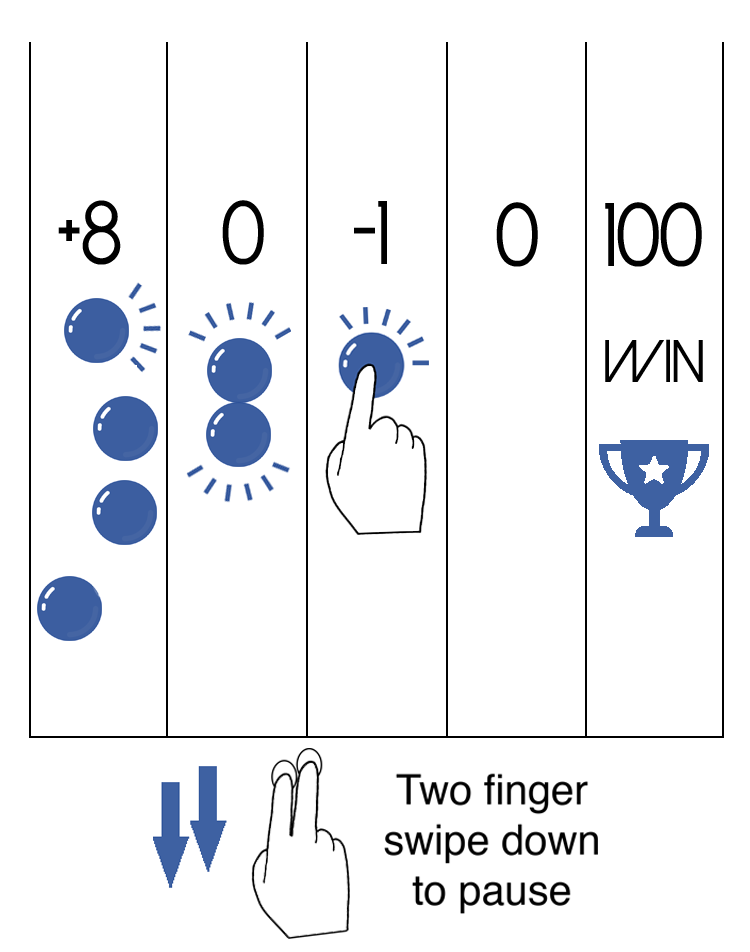
<style>
.page{position:relative;width:750px;height:952px;background:#ffffff}
.page>*{position:absolute;margin:0}
.t1{font:90px "DolceVita";color:#000000}
.t2{font:60px "DolceVita";color:#000000}
</style>
<div class="page">
<p class="t1" style="left:58px;top:200px;width:63px;height:65px">+8</p>
<p class="t1" style="left:222px;top:200px;width:42px;height:65px">0</p>
<p class="t1" style="left:354px;top:201px;width:33px;height:63px">-1</p>
<p class="t1" style="left:496px;top:202px;width:42px;height:65px">0</p>
<p class="t1" style="left:605px;top:202px;width:97px;height:65px">100</p>
<p class="t2" style="left:605px;top:339px;width:98px;height:43px">win</p>
</div>
